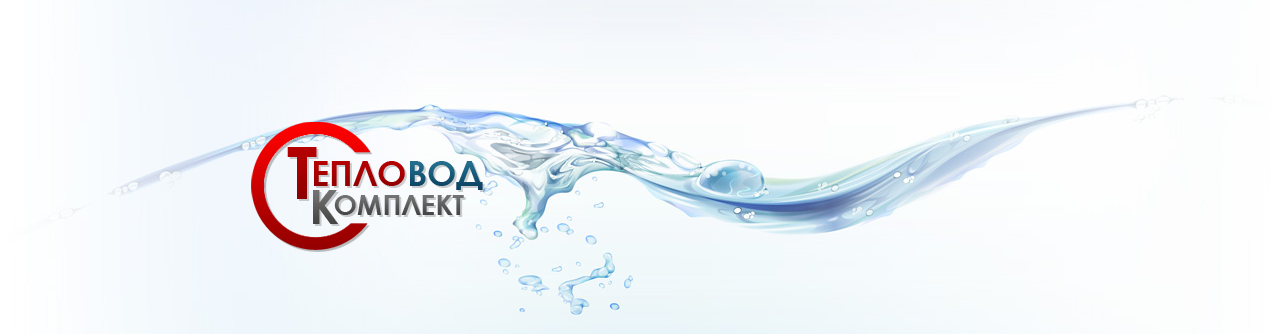
<style>
.page{position:relative;width:1280px;height:334px}
.page>*{position:absolute;margin:0}
.t1{font:72px "CenturyGothic-Bold";color:#aa0000;text-transform:uppercase}
.t2{font:60px "CenturyGothic-Bold";color:#aa0000;text-transform:uppercase}
.t3{font:60px "CenturyGothic-Bold";color:#185e7f;text-transform:uppercase}
.t4{font:48px "CenturyGothic-Bold";color:#636363;text-transform:uppercase}
</style>
<div class="page">
<p class="t1" style="left:287px;top:147px;width:30px;height:52px">Т</p>
<p class="t2" style="left:314px;top:161px;width:169px;height:29px">епло<span class="t3">Вод</span></p>
<p class="t4" style="left:313px;top:190px;width:25px;height:34px">К</p>
<p class="t4" style="left:334px;top:195px;width:130px;height:20px">омплект</p>
</div>
